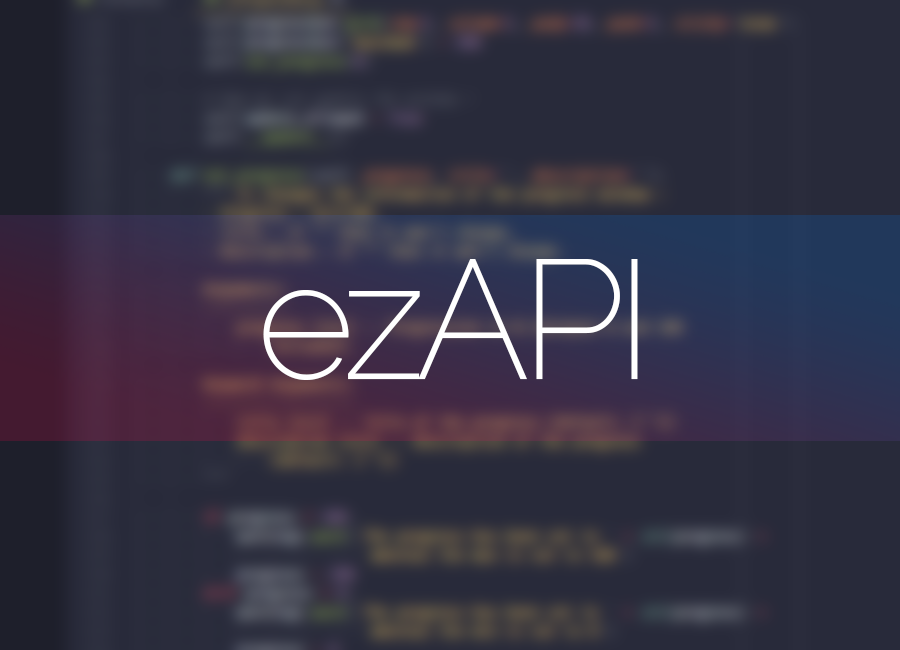
<style>
.page{position:relative;width:900px;height:650px;background:#282a3a}
.page>*{position:absolute;margin:0}
.t1{font:169.4px "Raleway-ExtraLight";letter-spacing:-0.06em;color:#ffffff}
</style>
<div class="page">
<p class="t1" style="left:263px;top:259px;width:375px;height:121px">ezAPI</p>
</div>
